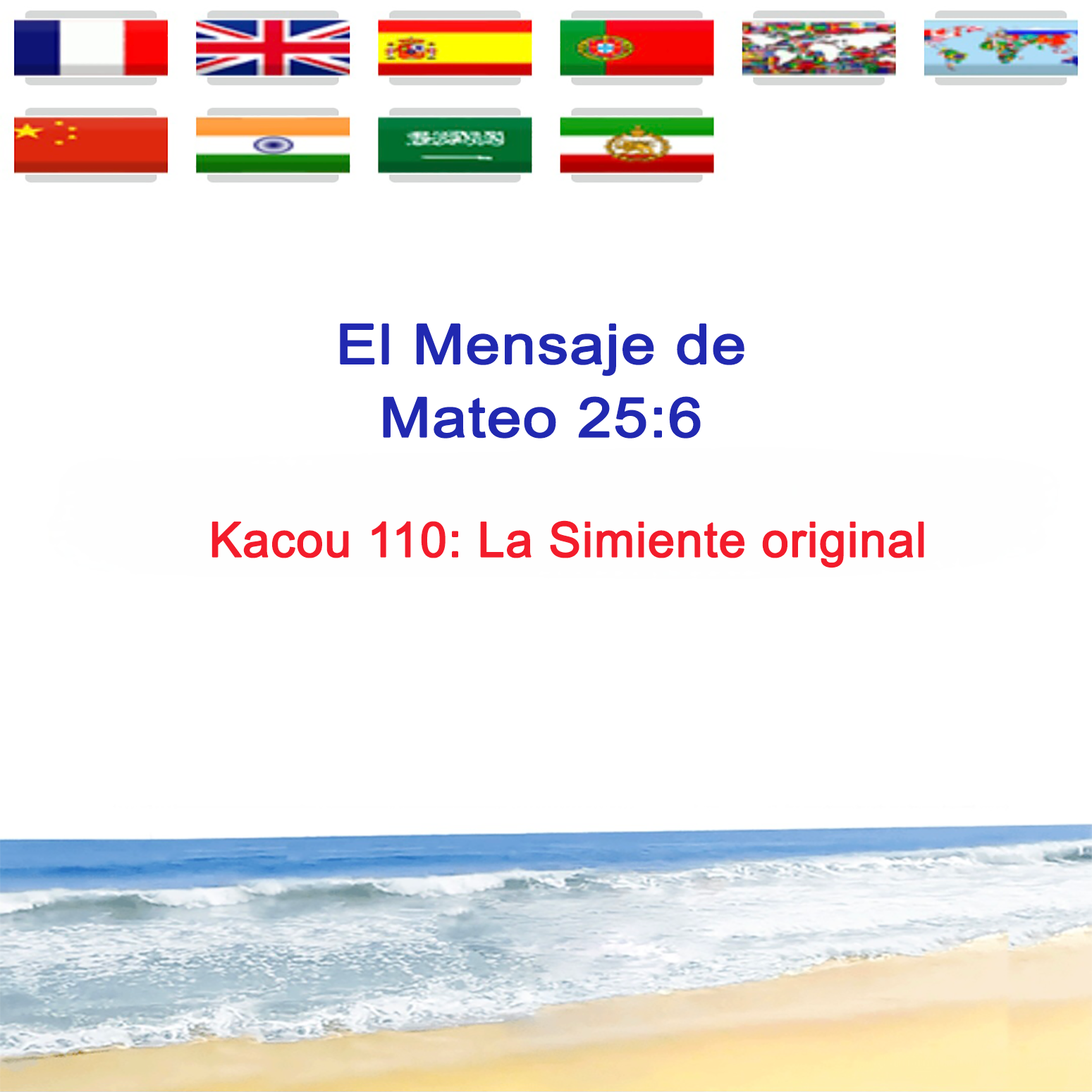
<style>
.page{position:relative;width:1092px;height:1092px;background:#ffffff}
.page>*{position:absolute;margin:0}
.t1{font:54.7px/73.3px "ArialMT";color:#2129b1;font-weight:bold;scale:1.13 1}
.t2{font:48.3px "ArialMT";color:#f31c2b;font-weight:bold}
</style>
<div class="page">
<p class="t1" style="left:340px;top:323px;width:404px;height:115px;text-align:center">El Mensaje de<br>Mateo 25:6</p>
<p class="t2" style="left:211px;top:520px;width:713px;height:48px">Kacou 110: La Simiente original</p>
</div>
